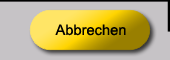
<style>
.page{position:relative;width:170px;height:60px;background:#c6c3c6}
.page>*{position:absolute;margin:0}
.t1{font:14.7px "ArialMT";color:#000000}
</style>
<div class="page">
<p class="t1" style="left:55px;top:24px;width:71px;height:12px">Abbrechen</p>
</div>
